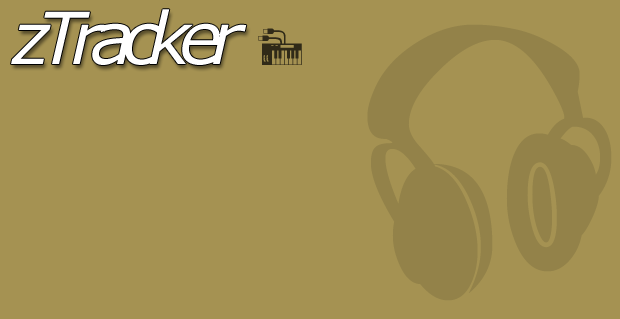
<style>
.page{position:relative;width:620px;height:319px;background:#a59252}
.page>*{position:absolute;margin:0}
.t1{font:72px "Verdana-Italic";letter-spacing:-0.159em;color:#ffffff}
</style>
<div class="page">
<p class="t1" style="left:11px;top:9px;width:236px;height:56px">zTracker</p>
</div>
